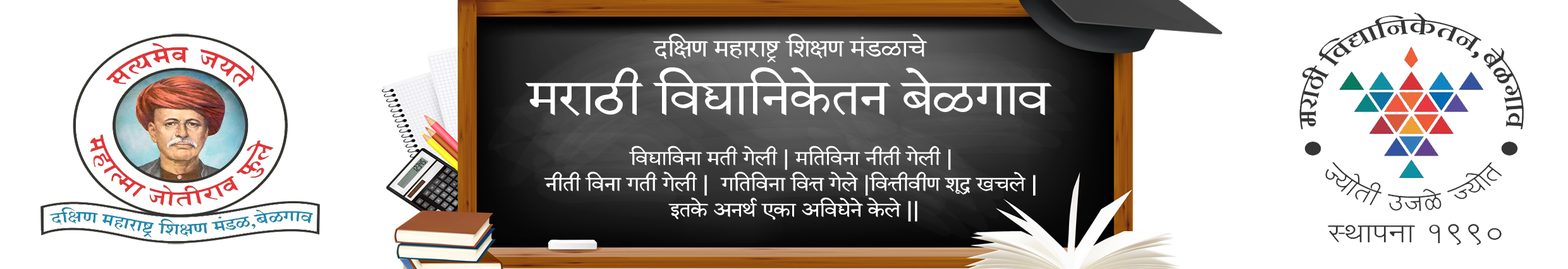
<style>
.page{position:relative;width:1568px;height:269px;background:#ffffff}
.page>*{position:absolute;margin:0}
.t1{font:25.8px "AksharUnicode";letter-spacing:0.002em;color:#ffffff;scale:1.18 1}
.t2{font:53.7px "AksharUnicode";letter-spacing:0.002em;color:#ffffff;scale:1.18 1}
.t3{font:21.5px/25.8px "AksharUnicode";letter-spacing:0.002em;color:#ffffff;scale:1.18 1}
</style>
<div class="page">
<p class="t1" style="left:652px;top:34px;width:276px;height:29px">दक्षिण महाराष्ट्र शिक्षण मंडळाचे</p>
<p class="t2" style="left:525px;top:67px;width:527px;height:49px">मराठी विद्यानिकेतन बेळगाव</p>
<p class="t3" style="left:544px;top:145px;width:492px;height:76px;text-align:center">विद्याविना मती गेली | मतिविना नीती गेली | <br>नीती विना गती गेली |  गतिविना वित्त गेले |वित्तीवीण शूद्र खचले | <br>इतके अनर्थ एका अविद्येने केले ||</p>
</div>
